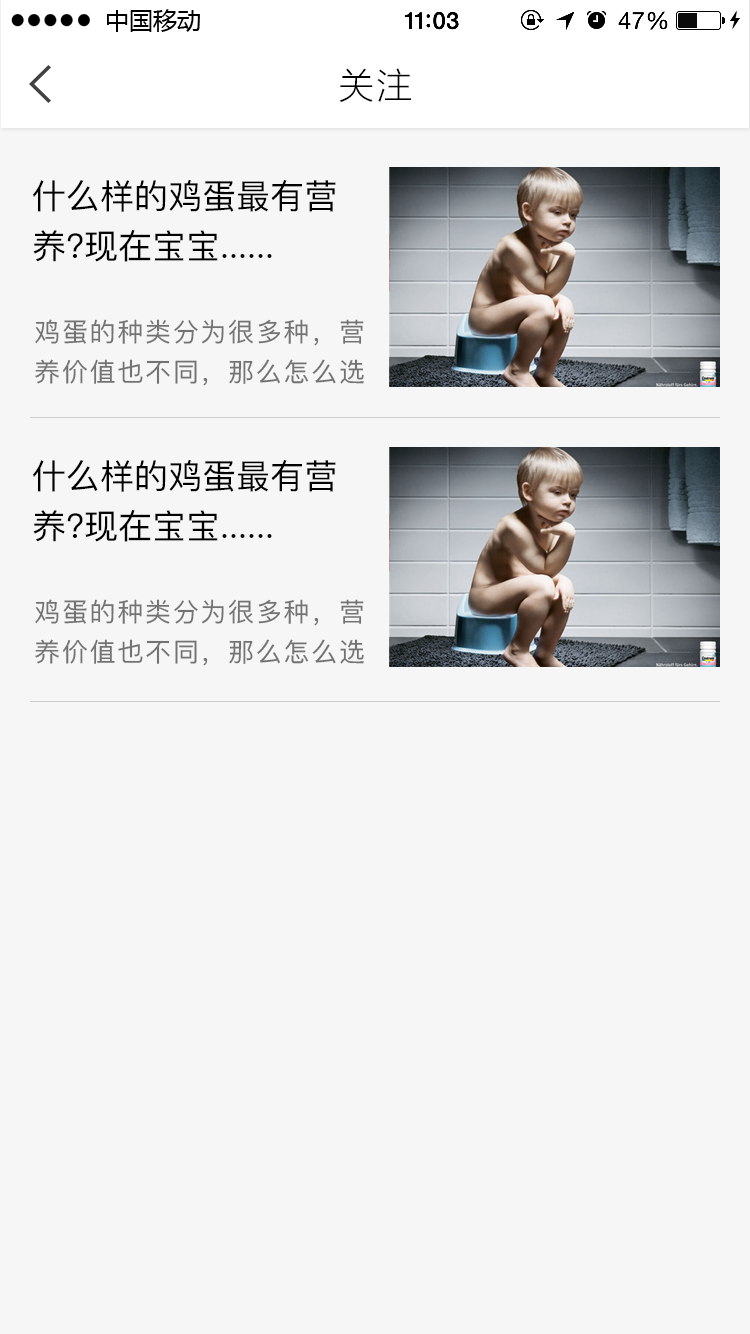
<style>
.page{position:relative;width:750px;height:1334px;background:#f6f6f6}
.page>*{position:absolute;margin:0}
.t1{font:36px "STHeitiSC-Light";color:#000000}
.t2{font:34px/50px "PingFang-SC-Medium";color:#000000}
.t3{font:26px/40px "PingFang-SC-Medium";color:#737373}
</style>
<div class="page">
<p class="t1" style="left:339px;top:68px;width:72px;height:34px">关注</p>
<p class="t2" style="left:33px;top:180px;width:303px;height:82px">什么样的鸡蛋最有营<br>养?现在宝宝......</p>
<p class="t3" style="left:35px;top:319px;width:329px;height:67px;text-align:justify">鸡蛋的种类分为很多种，营养价值也不同，那么怎么选择一个好的，营养价值高的呢，那么仔细阅读这......</p>
<p class="t2" style="left:33px;top:460px;width:303px;height:82px">什么样的鸡蛋最有营<br>养?现在宝宝......</p>
<p class="t3" style="left:35px;top:599px;width:329px;height:67px;text-align:justify">鸡蛋的种类分为很多种，营养价值也不同，那么怎么选择一个好的，营养价值高的呢，那么仔细阅读这......</p>
</div>
